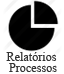
<style>
.page{position:relative;width:64px;height:74px;background:#ffffff}
.page>*{position:absolute;margin:0}
.t1{font:12px/11px "TimesNewRomanPSMT";color:#333333}
</style>
<div class="page">
<p class="t1" style="left:6px;top:52px;width:51px;height:20px;text-align:center">Relatórios<br> Processos</p>
</div>
